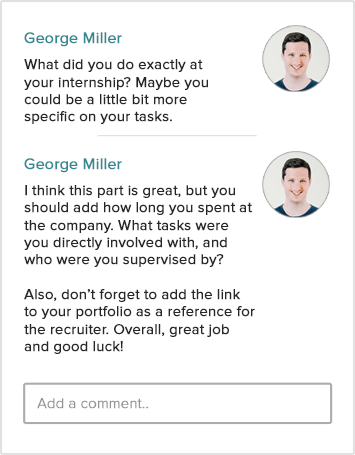
<style>
.page{position:relative;width:355px;height:455px;background:#ffffff}
.page>*{position:absolute;margin:0}
.t1{font:15.7px "ProximaNova-Regular";letter-spacing:-0.007em;color:#348892;font-weight:bold}
.t2{font:14.7px/17.3px "ProximaNova-Regular";letter-spacing:-0.007em;color:#272727;font-weight:bold}
.t3{font:14.7px "ProximaNova-Light";letter-spacing:-0.007em;color:#939393;font-weight:bold}
</style>
<div class="page">
<p class="t1" style="left:24px;top:32px;width:98px;height:15px">George Miller</p>
<p class="t2" style="left:24px;top:59px;width:184px;height:65px">What did you do exactly at your internship? Maybe you could be a little bit more specific on your tasks.</p>
<p class="t1" style="left:24px;top:158px;width:98px;height:15px">George Miller</p>
<p class="t2" style="left:24px;top:185px;width:231px;height:169px">I think this part is great, but you should add how long you spent at the company. What tasks were you directly involved with, and who were you supervised by?<br><br>Also, don’t forget to add the link to your portfolio as a reference for the recruiter. Overall, great job and good luck!</p>
<p class="t3" style="left:37px;top:398px;width:111px;height:11px">Add a comment..</p>
</div>
